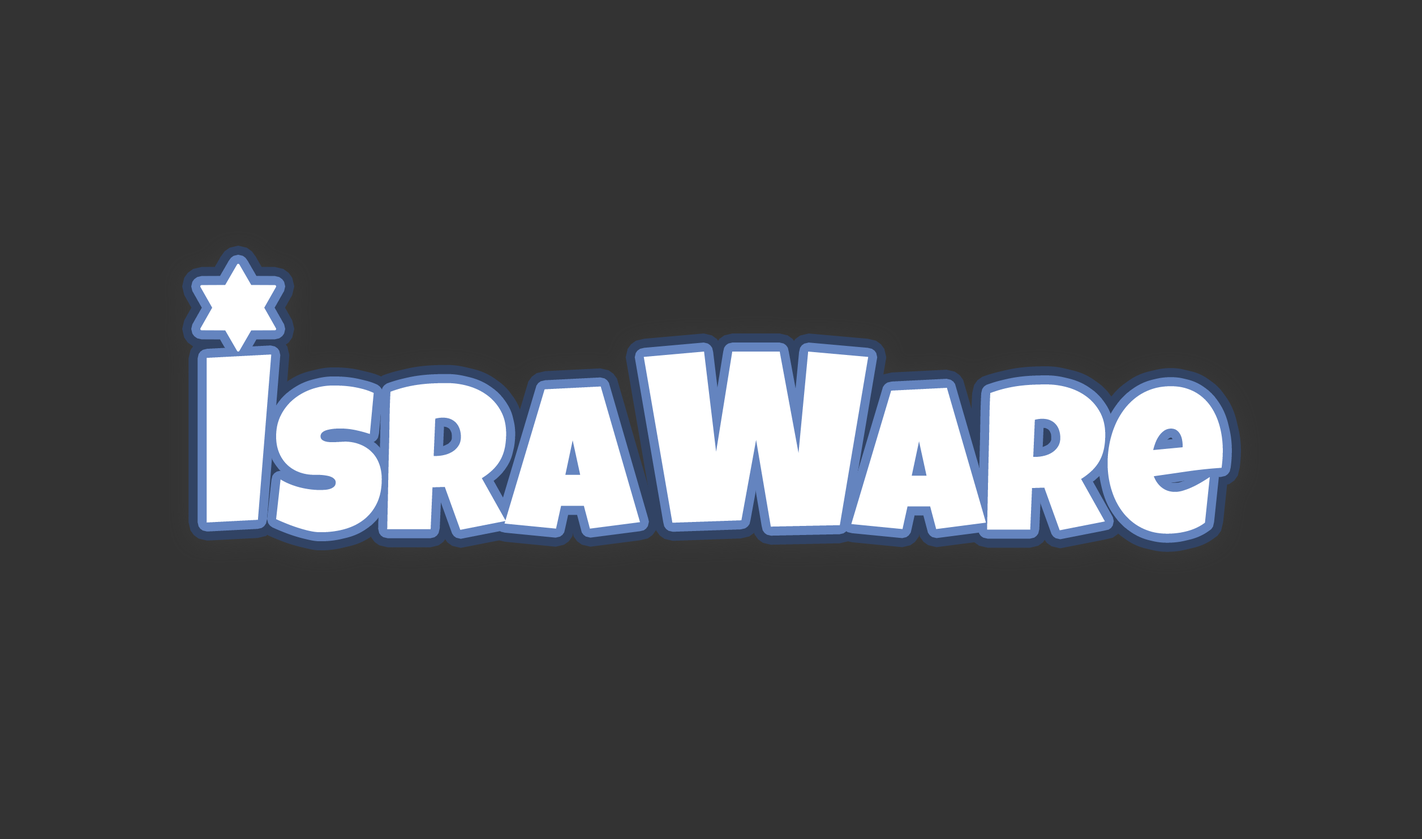
<style>
.page{position:relative;width:1422px;height:839px;background:#333333}
.page>*{position:absolute;margin:0}
.t1{font:248.3px "LuckiestGuy-Regular";color:#ffffff}
.t2{font:206.1px "LuckiestGuy-Regular";color:#ffffff}
.t3{font:204.8px "LuckiestGuy-Regular";color:#ffffff}
</style>
<div class="page">
<p class="t1" style="left:643px;top:351px;width:226px;height:176px">W</p>
<p class="t1" style="left:207px;top:354px;width:65px;height:168px">I</p>
<p class="t2" style="left:276px;top:383px;width:364px;height:149px">sra</p>
<p class="t3" style="left:851px;top:384px;width:372px;height:150px">are</p>
</div>
